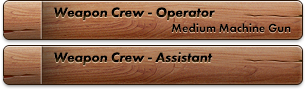
<style>
.page{position:relative;width:306px;height:90px}
.page>*{position:absolute;margin:0}
.t1{font:14px "FuturaPT-HeavyObl";color:#000000}
.t2{font:12px "FuturaPT-Heavy";color:#000000}
</style>
<div class="page">
<p class="t1" style="left:54px;top:7px;width:161px;height:14px">Weapon Crew - Operator</p>
<p class="t2" style="left:171px;top:23px;width:120px;height:10px">Medium Machine Gun</p>
<p class="t1" style="left:54px;top:51px;width:159px;height:15px">Weapon Crew - Assistant</p>
</div>
